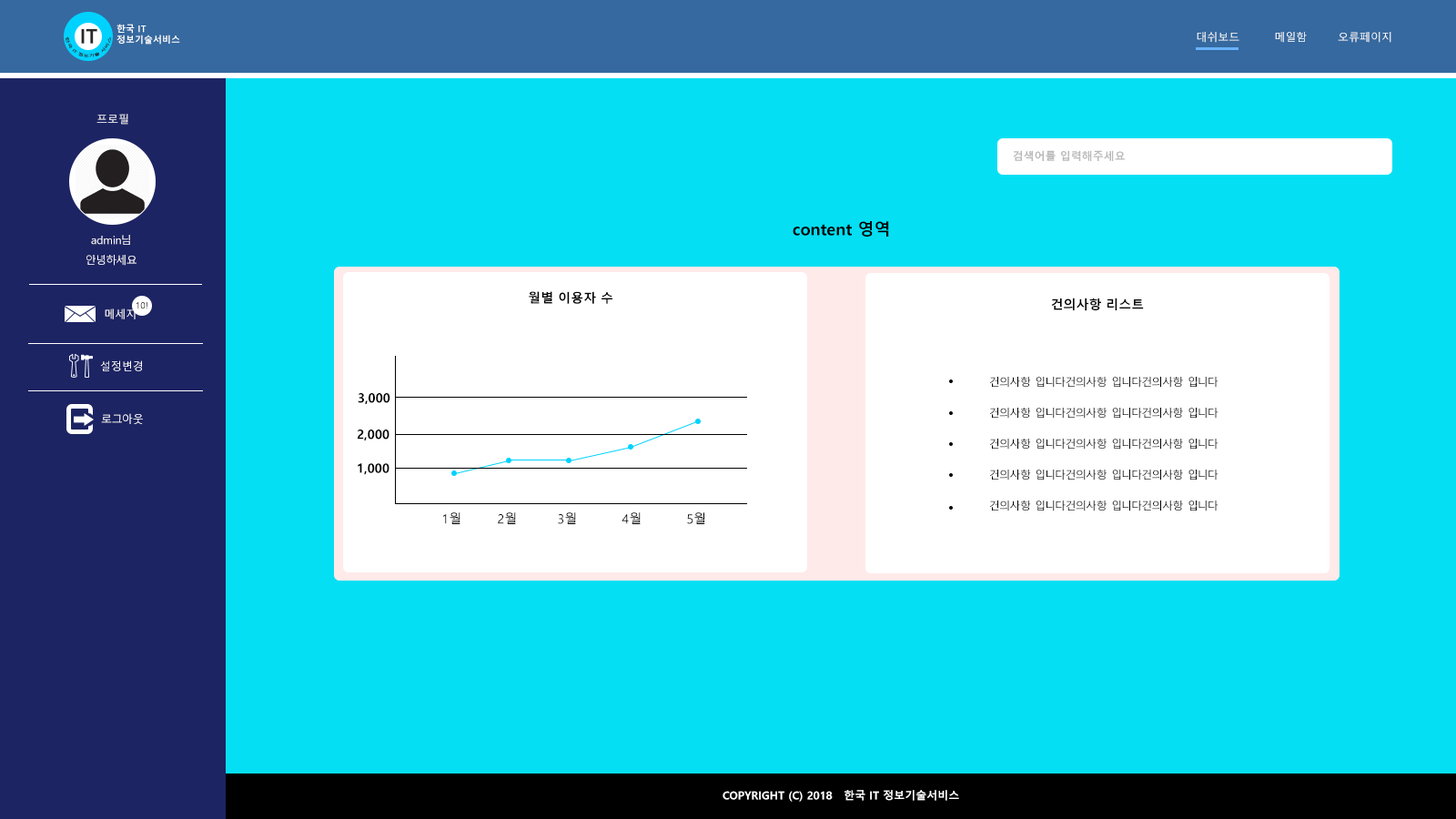
<style>
.page{position:relative;width:1456px;height:819px;background:#05dff3}
.page>*{position:absolute;margin:0}
.t1{font:20px "MalgunGothicBold";color:#282828}
.t2{font:9.1px "MalgunGothicBold";color:#ffffff}
.t3{font:3.6px "MalgunGothic";color:#282828}
.t4{font:10.9px "MalgunGothic";color:#ffffff}
.t5{font:10.9px "MalgunGothicBold";color:#b8b8b8}
.t6{font:16.4px "MalgunGothicBold";color:#000000}
.t7{font:10.9px/20px "MalgunGothic";color:#ffffff}
.t8{font:12.7px "MalgunGothicBold";color:#000000}
.t9{font:9.1px "MalgunGothic"}
.t10{font:10.9px/30.9px "MalgunGothic";color:#000000}
.t11{font:12.7px "MalgunGothic";color:#000000}
.t12{font:10.9px "MalgunGothicBold";color:#ffffff}
</style>
<div class="page">
<p class="t1" style="left:81px;top:29px;width:16px;height:15px">IT</p>
<p class="t2" style="left:116px;top:24px;width:64px;height:21px">한국 IT<br>정보기술서비스</p>
<p class="t3" style="left:65px;top:36px;width:47px;height:21px;text-align:center">한국 IT 정보기술 서비스</p>
<p class="t4" style="left:1197px;top:32px;width:194px;height:11px">대쉬보드         메일함        오류페이지</p>
<p class="t4" style="left:96px;top:114px;width:32px;height:11px">프로필</p>
<p class="t4" style="left:96px;top:114px;width:32px;height:11px">프로필</p>
<p class="t5" style="left:1013px;top:150px;width:112px;height:11px">검색어를 입력해주세요</p>
<p class="t6" style="left:793px;top:221px;width:96px;height:16px">content 영역</p>
<p class="t7" style="left:86px;top:235px;width:50px;height:31px;text-align:center">admin님<br>안녕하세요</p>
<p class="t7" style="left:86px;top:235px;width:50px;height:31px;text-align:center">admin님<br>안녕하세요</p>
<p class="t8" style="left:529px;top:291px;width:83px;height:13px">월별 이용자 수</p>
<p class="t9" style="left:136px;top:302px;width:11px;height:7px">10!</p>
<p class="t9" style="left:136px;top:302px;width:11px;height:7px">10!</p>
<p class="t8" style="left:1051px;top:298px;width:93px;height:13px">건의사항 리스트</p>
<p class="t4" style="left:105px;top:308px;width:31px;height:11px">메세지</p>
<p class="t4" style="left:105px;top:308px;width:31px;height:11px">메세지</p>
<p class="t4" style="left:100px;top:360px;width:42px;height:11px">설정변경</p>
<p class="t4" style="left:100px;top:360px;width:42px;height:11px">설정변경</p>
<p class="t10" style="left:989px;top:377px;width:229px;height:134px">건의사항 입니다건의사항 입니다건의사항 입니다<br>건의사항 입니다건의사항 입니다건의사항 입니다<br>건의사항 입니다건의사항 입니다건의사항 입니다<br>건의사항 입니다건의사항 입니다건의사항 입니다<br>건의사항 입니다건의사항 입니다건의사항 입니다</p>
<p class="t8" style="left:358px;top:393px;width:32px;height:11px">3,000</p>
<p class="t4" style="left:101px;top:413px;width:42px;height:11px">로그아웃</p>
<p class="t4" style="left:101px;top:413px;width:42px;height:11px">로그아웃</p>
<p class="t8" style="left:358px;top:430px;width:31px;height:10px">2,000</p>
<p class="t8" style="left:358px;top:463px;width:31px;height:12px">1,000</p>
<p class="t11" style="left:443px;top:512px;width:262px;height:12px">1월        2월         3월          4월          5월</p>
<p class="t12" style="left:723px;top:790px;width:236px;height:12px">COPYRIGHT (C) 2018   한국 IT 정보기술서비스</p>
</div>
